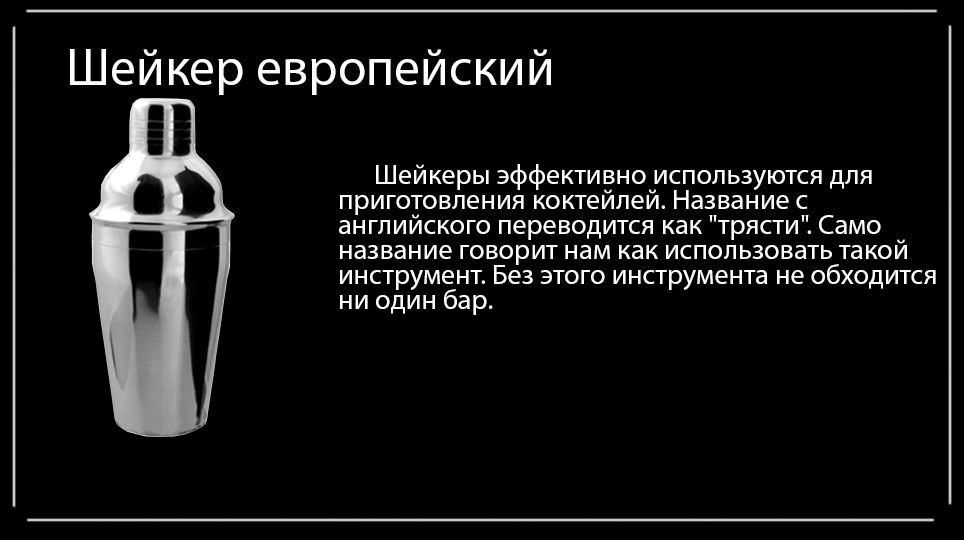
<style>
.page{position:relative;width:964px;height:540px;background:#000000}
.page>*{position:absolute;margin:0}
.t1{font:52px "MyriadPro-Regular";color:#ffffff}
.t2{font:28.3px/25px "MyriadPro-Regular";color:#ffffff}
</style>
<div class="page">
<p class="t1" style="left:70px;top:49px;width:481px;height:46px">Шейкер европейский</p>
<p class="t2" style="left:339px;top:164px;width:597px;height:151px">Шейкеры эффективно используются для <br>приготовления коктейлей. Название с <br>английского переводится как "трясти". Само <br>название говорит нам как использовать такой <br>инструмент. Без этого инструмента не обходится <br>ни один бар.</p>
</div>
